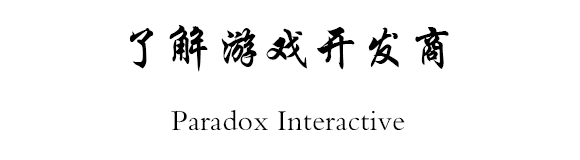
<style>
.page{position:relative;width:580px;height:160px;background:#ffffff}
.page>*{position:absolute;margin:0}
.t1{font:48px "STXingkai";letter-spacing:0.01em;color:#000000}
.t2{font:30px "FZKTJW--GB1-0";letter-spacing:0.01em;color:#000000}
</style>
<div class="page">
<p class="t1" style="left:130px;top:25px;width:319px;height:47px">了解游戏开发商</p>
<p class="t2" style="left:171px;top:110px;width:234px;height:21px">Paradox Interactive</p>
</div>
